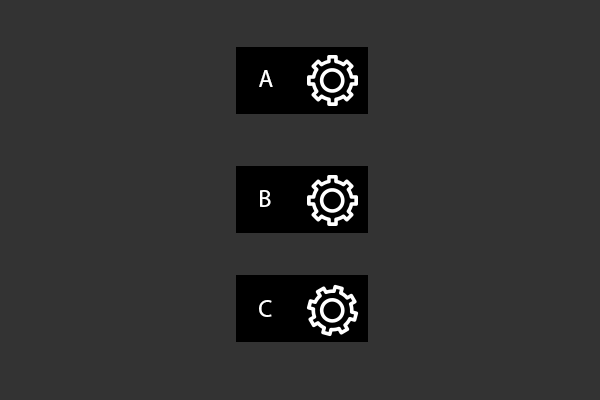
<style>
.page{position:relative;width:600px;height:400px;background:#333333}
.page>*{position:absolute;margin:0}
.t1{font:24px "MyriadPro-Regular";color:#ffffff}
</style>
<div class="page">
<p class="t1" style="left:259px;top:70px;width:14px;height:17px">A</p>
<p class="t1" style="left:260px;top:190px;width:11px;height:17px">B</p>
<p class="t1" style="left:259px;top:300px;width:13px;height:17px">C</p>
</div>
